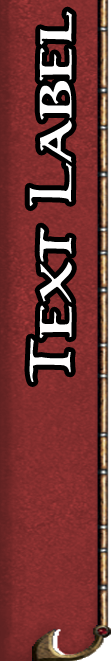
<style>
.page{position:relative;width:112px;height:661px}
.page>*{position:absolute;margin:0}
.t1{font:60px "DnDLolthSC";color:#fffefe;scale:1.19 1}
</style>
<div class="page">
<p class="t1" style="left:29px;top:11px;width:43px;height:371px;rotate:-90deg">Text Label</p>
</div>
